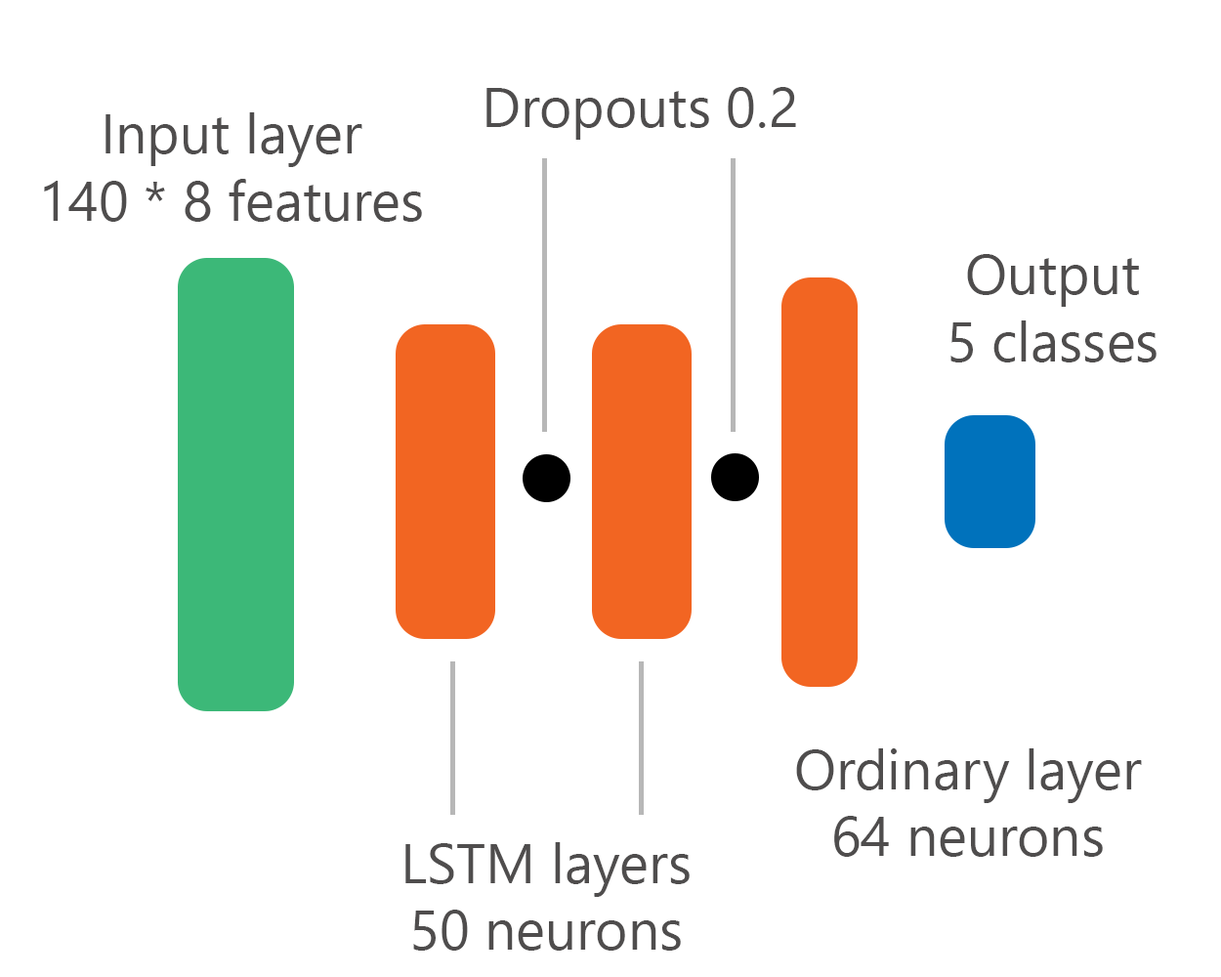
<style>
.page{position:relative;width:1221px;height:977px;background:#ffffff}
.page>*{position:absolute;margin:0}
.t1{font:55.7px "NirmalaUI";color:#4f4d4d}
</style>
<div class="page">
<p class="t1" style="left:486px;top:87px;width:310px;height:53px">Dropouts 0.2</p>
<p class="t1" style="left:44px;top:112px;width:378px;height:110px;text-align:center">Input layer<br>140 * 8 features</p>
<p class="t1" style="left:950px;top:254px;width:206px;height:108px;text-align:center">Output<br>5 classes</p>
<p class="t1" style="left:796px;top:748px;width:346px;height:109px;text-align:center">Ordinary layer<br>64 neurons</p>
<p class="t1" style="left:405px;top:842px;width:285px;height:108px;text-align:center">LSTM layers<br>50 neurons</p>
</div>
